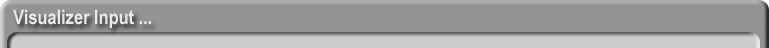
<style>
.page{position:relative;width:769px;height:48px;background:#929292}
.page>*{position:absolute;margin:0}
.t1{font:20px "ArialNarrow-Bold";color:#eae8eb}
</style>
<div class="page">
<p class="t1" style="left:13px;top:9px;width:138px;height:19px">Visualizer Input ...</p>
</div>
